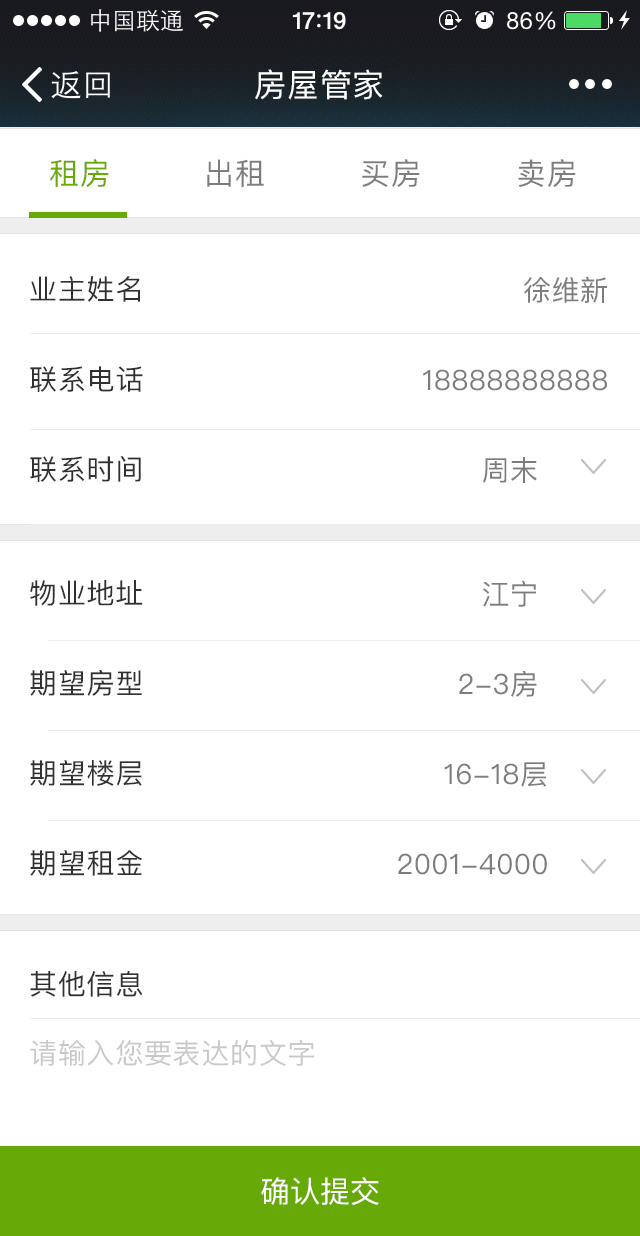
<style>
.page{position:relative;width:640px;height:1236px;background:#ffffff}
.page>*{position:absolute;margin:0}
.t1{font:32px "PingFangSC-Regular";letter-spacing:0.025em;color:#ffffff}
.t2{font:30px "PingFangSC-Regular";letter-spacing:0.025em;color:#67aa07}
.t3{font:30px "PingFangSC-Regular";letter-spacing:0.025em;color:#7d7d7d}
.t4{font:28px/90px "PingFangSC-Regular";letter-spacing:0.025em;color:#313131}
.t5{font:28px/90px "PingFangSC-Regular";letter-spacing:0.025em;color:#7d7d7d}
.t6{font:28px "PingFangSC-Regular";letter-spacing:0.025em;color:#313131}
.t7{font:28px "PingFangSC-Regular";letter-spacing:0.025em;color:#c9c9c9}
.t8{font:30px "PingFangSC-Regular";color:#ffffff}
</style>
<div class="page">
<p class="t1" style="left:255px;top:69px;width:128px;height:31px">房屋管家</p>
<p class="t2" style="left:50px;top:159px;width:59px;height:28px">租房</p>
<p class="t3" style="left:207px;top:159px;width:57px;height:28px">出租</p>
<p class="t3" style="left:362px;top:159px;width:58px;height:28px">买房</p>
<p class="t3" style="left:518px;top:159px;width:58px;height:28px">卖房</p>
<p class="t4" style="left:30px;top:276px;width:113px;height:206px">业主姓名<br>联系电话<br>联系时间</p>
<p class="t5" style="left:423px;top:276px;width:184px;height:207px;text-align:right">徐维新<br>18888888888<br>周末</p>
<p class="t4" style="left:30px;top:580px;width:113px;height:296px">物业地址<br>期望房型<br>期望楼层<br>期望租金</p>
<p class="t5" style="left:398px;top:580px;width:149px;height:295px;text-align:right">江宁       <br>2-3房       <br>16-18层      <br>2001-4000</p>
<p class="t6" style="left:30px;top:970px;width:113px;height:27px">其他信息</p>
<p class="t7" style="left:30px;top:1040px;width:284px;height:26px">请输入您要表达的文字</p>
<p class="t8" style="left:261px;top:1177px;width:118px;height:28px">确认提交</p>
</div>
